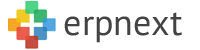
<style>
.page{position:relative;width:200px;height:50px;background:#ffffff}
.page>*{position:absolute;margin:0}
.t1{font:36px "PTSans-Regular";color:#434343}
</style>
<div class="page">
<p class="t1" style="left:64px;top:12px;width:118px;height:31px">erpnext</p>
</div>
